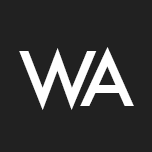
<style>
.page{position:relative;width:152px;height:152px;background:#212121}
.page>*{position:absolute;margin:0}
.t1{font:72.7px "Futura-Medium";letter-spacing:-0.15em;color:#ffffff}
</style>
<div class="page">
<p class="t1" style="left:19px;top:47px;width:115px;height:63px">WA</p>
</div>
